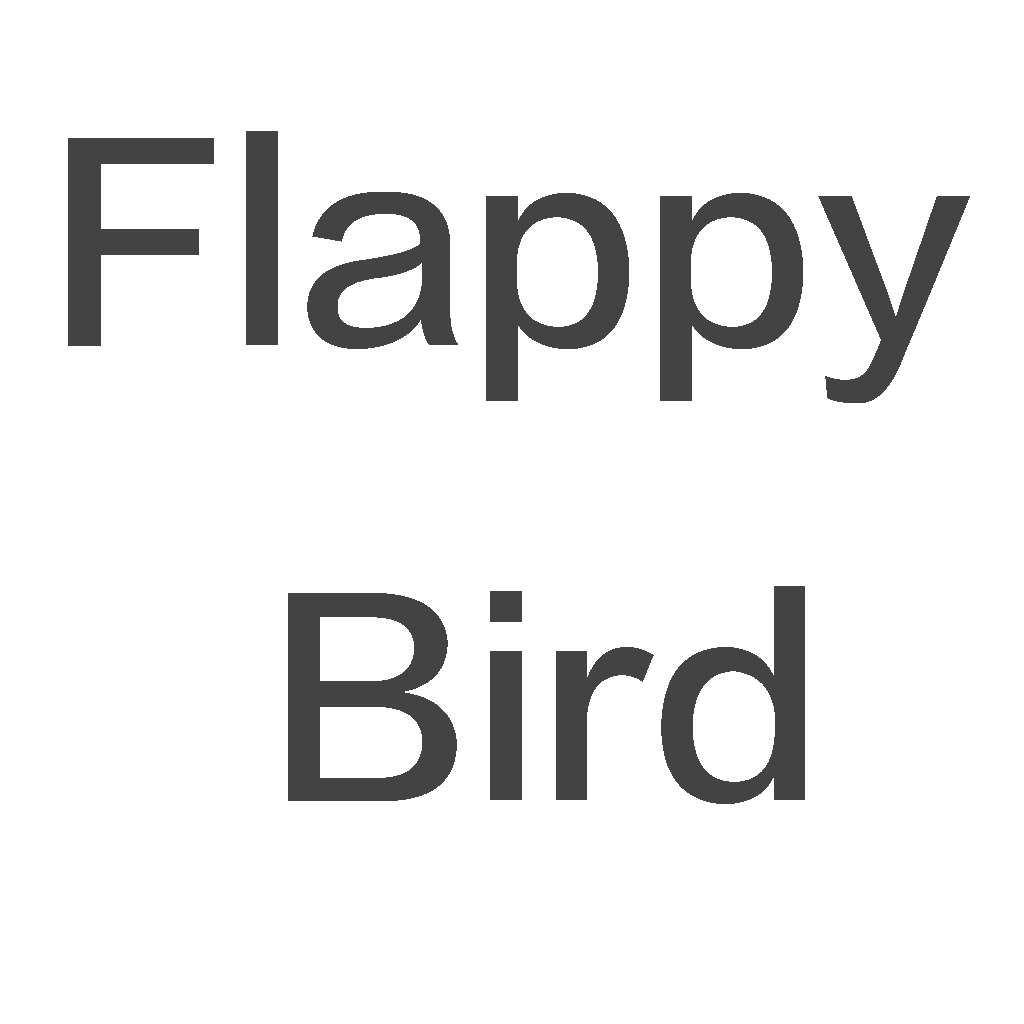
<style>
.page{position:relative;width:1024px;height:1024px;background:#ffffff}
.page>*{position:absolute;margin:0}
.t1{font:260px "FZLTZHK--GBK1-0";color:#434343}
</style>
<div class="page">
<p class="t1" style="left:68px;top:131px;width:902px;height:673px;text-align:center">Flappy <br>Bird</p>
</div>
